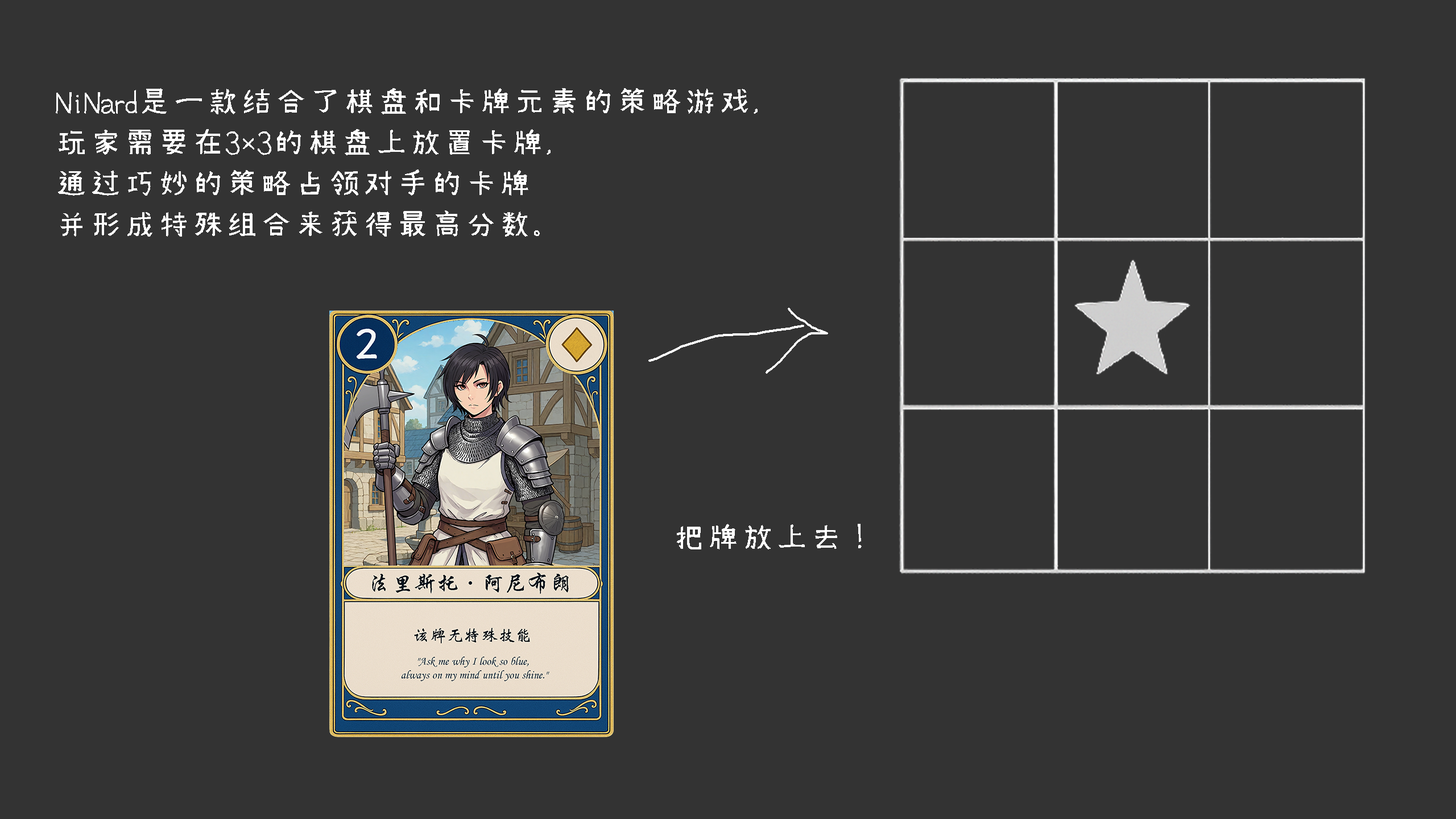
<style>
.page{position:relative;width:1456px;height:819px;background:#333333}
.page>*{position:absolute;margin:0}
.t1{font:34.1px "Xim-Sans-Brahmic";color:#ffffff}
</style>
<div class="page">
<p class="t1" style="left:56px;top:88px;width:702px;height:149px">NiNard是一款结合了棋盘和卡牌元素的策略游戏，<br>玩家需要在3×3的棋盘上放置卡牌，<br>通过巧妙的策略占领对手的卡牌<br>并形成特殊组合来获得最高分数。</p>
<p class="t1" style="left:677px;top:524px;width:185px;height:25px">把牌放上去！</p>
</div>
